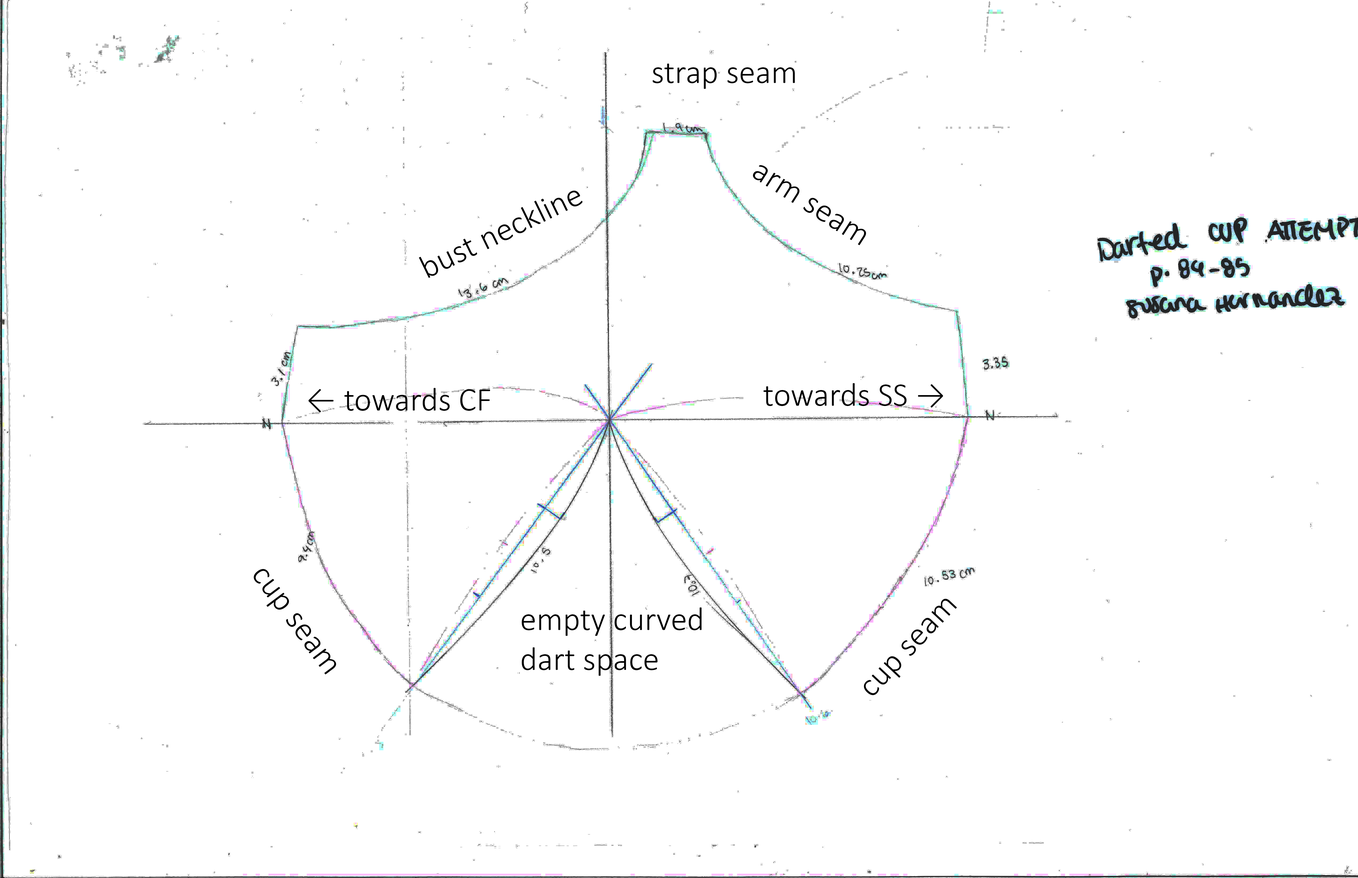
<style>
.page{position:relative;width:1358px;height:878px;background:#ffffff}
.page>*{position:absolute;margin:0}
.t1{font:33.3px "Calibri-Light";color:#000000}
</style>
<div class="page">
<p class="t1" style="left:652px;top:64px;width:143px;height:25px">strap seam</p>
<p class="t1" style="left:752px;top:165px;width:114px;height:80px;rotate:33deg">arm seam</p>
<p class="t1" style="left:419px;top:191px;width:163px;height:87px;rotate:-26deg">bust neckline</p>
<p class="t1" style="left:308px;top:388px;width:182px;height:25px">← towards CF</p>
<p class="t1" style="left:763px;top:383px;width:180px;height:25px">towards SS →</p>
<p class="t1" style="left:253px;top:569px;width:83px;height:106px;rotate:53deg">cup seam</p>
<p class="t1" style="left:863px;top:599px;width:94px;height:97px;rotate:-47deg">cup seam</p>
<p class="t1" style="left:521px;top:608px;width:180px;height:68px">empty curved<br>dart space</p>
</div>
